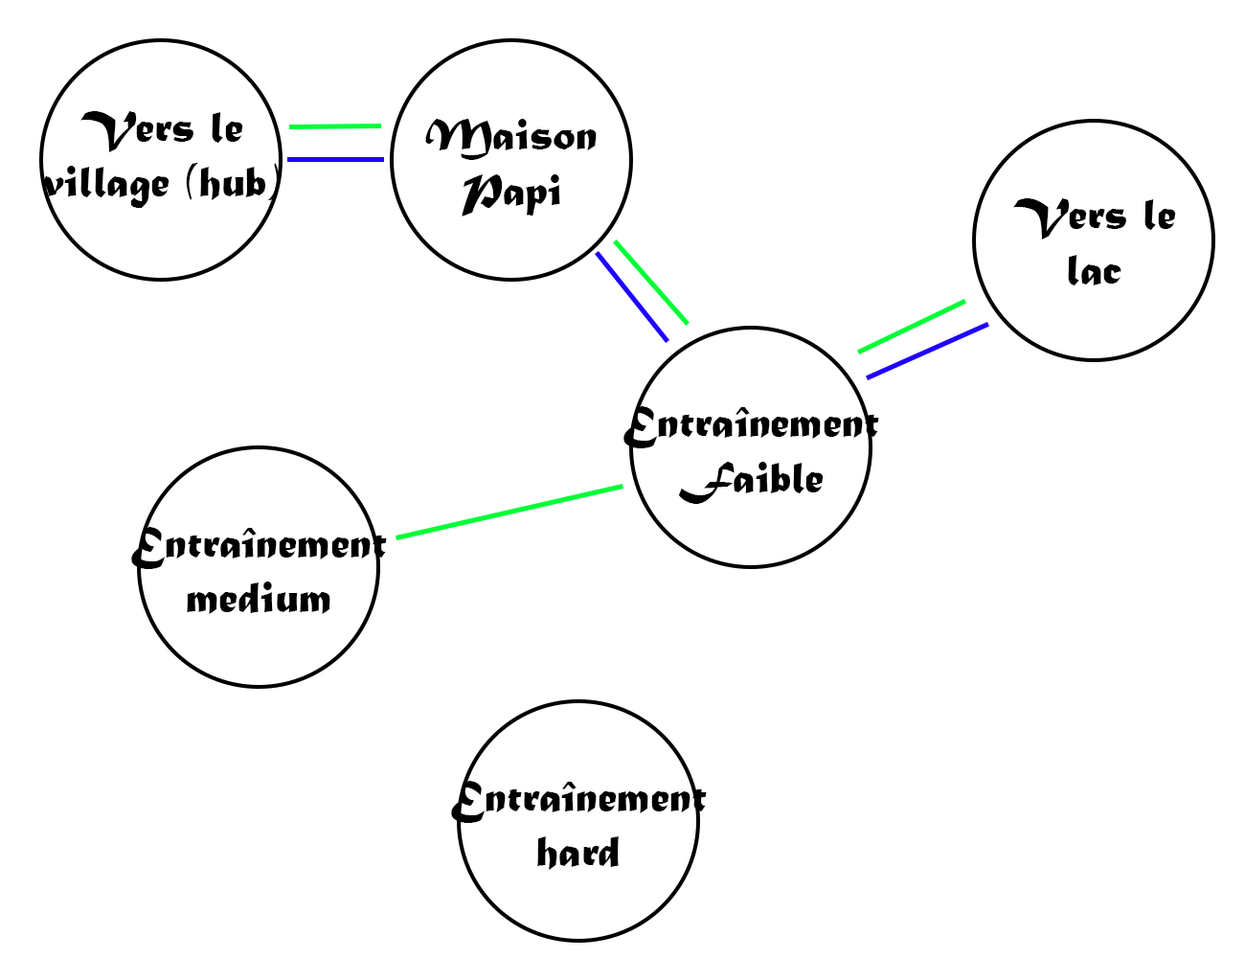
<style>
.page{position:relative;width:1245px;height:958px;background:#ffffff}
.page>*{position:absolute;margin:0}
.t1{font:46px "MaturaMTScriptCapitals";color:#000000}
</style>
<div class="page">
<p class="t1" style="left:43px;top:111px;width:237px;height:97px;text-align:center">Vers le<br>village (hub)</p>
<p class="t1" style="left:425px;top:119px;width:172px;height:97px;text-align:center">Maison<br>Papi</p>
<p class="t1" style="left:1013px;top:198px;width:163px;height:87px;text-align:center">Vers le<br>lac</p>
<p class="t1" style="left:623px;top:406px;width:256px;height:98px;text-align:center">Entraînement<br>Faible</p>
<p class="t1" style="left:131px;top:527px;width:256px;height:87px;text-align:center">Entraînement<br>medium</p>
<p class="t1" style="left:451px;top:781px;width:256px;height:89px;text-align:center">Entraînement<br>hard</p>
</div>
